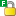
<style>
.page{position:relative;width:16px;height:16px;background:#ffffff}
.page>*{position:absolute;margin:0}
.t1{font:7.2px "Arial-BoldMT";color:#ffffff}
</style>
<div class="page">
<p class="t1" style="left:2px;top:1px;width:3px;height:5px">F</p>
</div>
